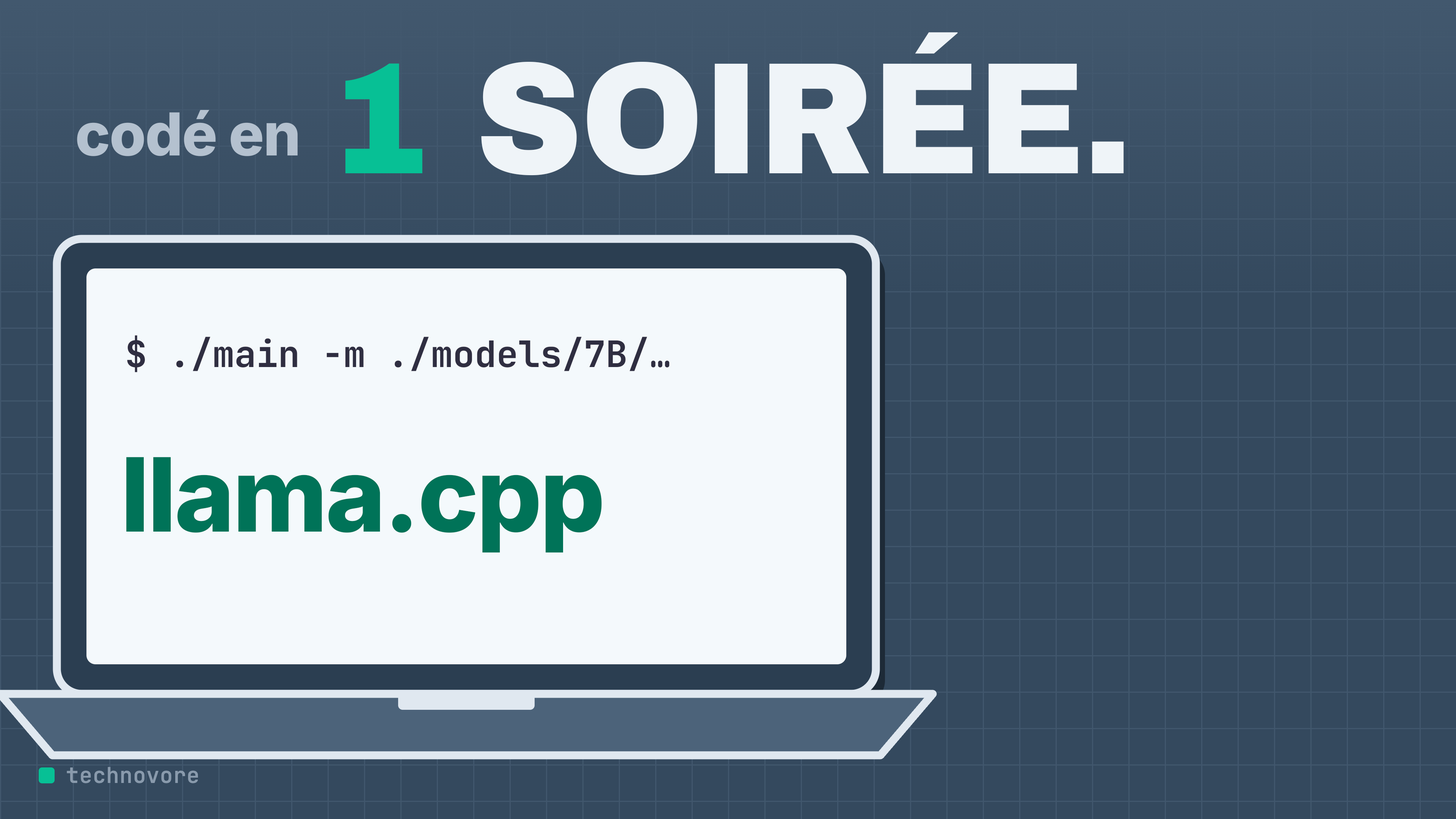
<style>
.page{position:relative;width:1456px;height:819px;background:#34495e}
.page>*{position:absolute;margin:0}
.t1{font:159.2px "ArchivoBlack-Regular";letter-spacing:-0.01em;color:#eff4f8;scale:0.93 1}
.t2{font:159.2px "ArchivoBlack-Regular";letter-spacing:-0.01em;color:#07c095;scale:0.93 1}
.t3{font:59.1px "Inter-ExtraBold";letter-spacing:-0.015em;color:#b4c1cf}
.t4{font:36.4px "JetBrainsMono-Bold";color:#2f2e41}
.t5{font:102.4px "Inter-ExtraBold";letter-spacing:-0.02em;color:#007358}
</style>
<div class="page">
<p class="t1" style="left:345px;top:32px;width:779px;height:144px"><span class="t2">1</span> SOIRÉE.</p>
<p class="t3" style="left:77px;top:110px;width:221px;height:47px">codé en</p>
<p class="t4" style="left:127px;top:335px;width:543px;height:38px">$ ./main -m ./models/7B/…</p>
<p class="t5" style="left:126px;top:457px;width:476px;height:96px">llama.cpp</p>
</div>
